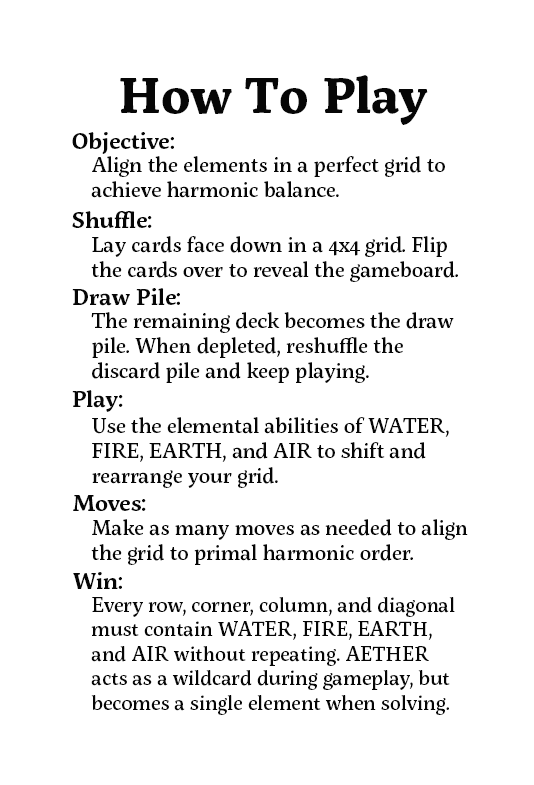
<style>
.page{position:relative;width:534px;height:785px;background:#ffffff}
.page>*{position:absolute;margin:0}
.t1{font:50px "ServusSlab-Bold";color:#060606}
.t2{font:23px "ServusSlab-SemiBold";color:#060606}
.t3{font:21px "ServusSlab-Medium";color:#060606}
.t4{font:20.3px "ServusSlab-Medium";color:#060606}
</style>
<div class="page">
<p class="t1" style="left:120px;top:75px;width:308px;height:50px">How To Play</p>
<p class="t2" style="left:72px;top:132px;width:102px;height:22px">Objective:</p>
<p class="t3" style="left:91px;top:156px;width:354px;height:42px">Align the elements in a perfect grid to achieve harmonic balance.</p>
<p class="t2" style="left:72px;top:211px;width:80px;height:17px">Shuffle:</p>
<p class="t3" style="left:91px;top:236px;width:367px;height:46px">Lay cards face down in a 4x4 grid. Flip the cards over to reveal the gameboard.</p>
<p class="t2" style="left:72px;top:288px;width:108px;height:18px">Draw Pile:</p>
<p class="t3" style="left:91px;top:312px;width:363px;height:71px">The remaining deck becomes the draw pile. When depleted, reshuffle the discard pile and keep playing.</p>
<p class="t2" style="left:72px;top:390px;width:51px;height:22px">Play:</p>
<p class="t3" style="left:92px;top:417px;width:357px;height:71px">Use the elemental abilities of WATER, FIRE, EARTH, and AIR to shift and rearrange your grid.</p>
<p class="t2" style="left:73px;top:495px;width:73px;height:16px">Moves:</p>
<p class="t3" style="left:91px;top:519px;width:377px;height:46px">Make as many moves as needed to align the grid to primal harmonic order.</p>
<p class="t2" style="left:73px;top:572px;width:49px;height:17px">Win:</p>
<p class="t4" style="left:91px;top:597px;width:364px;height:118px">Every row, corner, column, and diagonal must contain WATER, FIRE, EARTH, and AIR without repeating. AETHER acts as a wildcard during gameplay, but becomes a single element when solving.</p>
</div>
